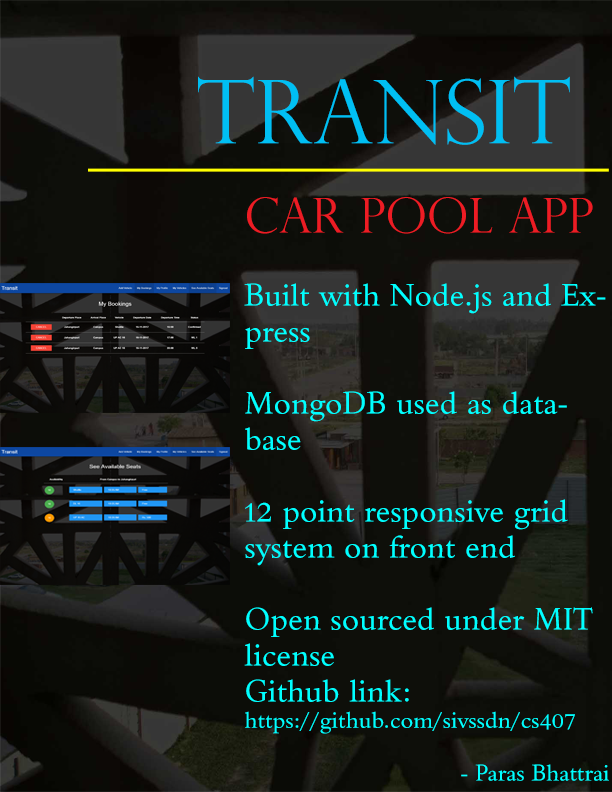
<style>
.page{position:relative;width:612px;height:792px;background:#0e0f0a}
.page>*{position:absolute;margin:0}
.t1{font:88px "PerpetuaTitlingMT-Light";color:#00bff3}
.t2{font:54.3px "PerpetuaTitlingMT-Light";color:#ffff00;scale:1.2 1}
.t3{font:48px "PerpetuaTitlingMT-Light";color:#ed1c24}
.t4{font:30px "SanskritText";color:#00ffff}
.t5{font:22px "SanskritText";color:#00ffff}
</style>
<div class="page">
<p class="t1" style="left:198px;top:76px;width:372px;height:69px">TRANSIT</p>
<p class="t2" style="left:88px;top:168px;width:521px;height:4px">________________</p>
<p class="t3" style="left:247px;top:197px;width:346px;height:37px">CAR POOL APP</p>
<p class="t4" style="left:244px;top:283px;width:365px;height:498px">Built with Node.js and Express<br><br>MongoDB used as database<br><br>12 point responsive grid system on front end<br><br>Open sourced under MIT license<br>Github link:<br><span class="t5">https://github.com/sivssdn/cs407<br><br>      - Paras Bhattrai</span></p>
</div>
